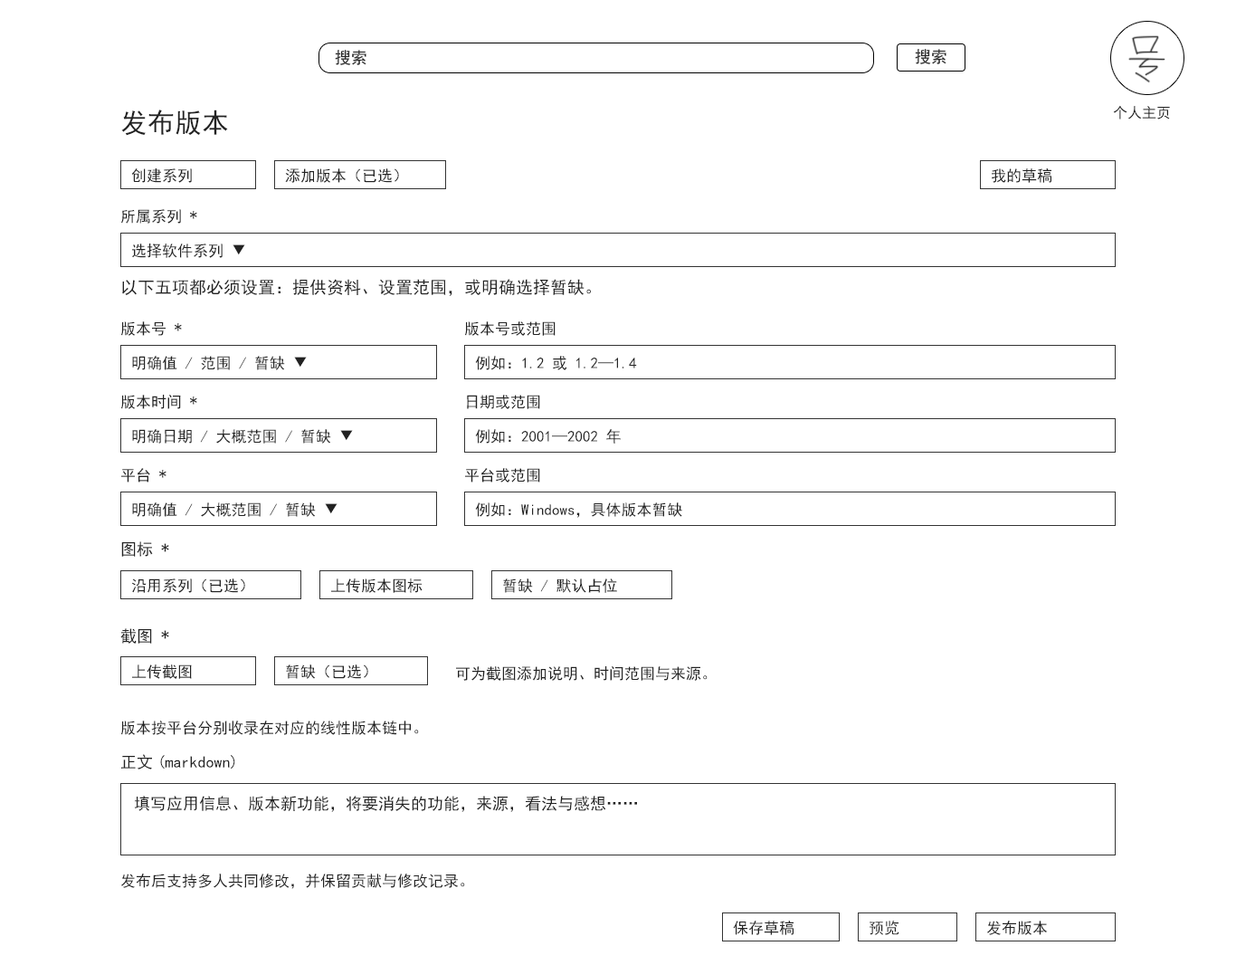
<style>
.page{position:relative;width:1236px;height:965px;background:#ffffff}
.page>*{position:absolute;margin:0}
.t1{font:16.3px "SimHei";color:#282828}
.t2{font:27.1px "SimHei";color:#222222}
.t3{font:14.5px "SimHei";color:#222222}
.t4{font:15.4px "SimHei";color:#222222}
.t5{font:17.2px "SimHei";color:#222222}
.t6{font:16.3px "SimHei";color:#222222}
</style>
<div class="page">
<p class="t1" style="left:335px;top:50px;width:31px;height:15px">搜索</p>
<p class="t1" style="left:915px;top:49px;width:32px;height:15px">搜索</p>
<p class="t2" style="left:121px;top:109px;width:107px;height:27px">发布版本</p>
<p class="t3" style="left:1113px;top:105px;width:57px;height:14px">个人主页</p>
<p class="t4" style="left:131px;top:168px;width:61px;height:15px">创建系列</p>
<p class="t4" style="left:285px;top:168px;width:114px;height:15px">添加版本（已选）</p>
<p class="t4" style="left:992px;top:168px;width:60px;height:15px">我的草稿</p>
<p class="t4" style="left:121px;top:209px;width:76px;height:15px">所属系列 *</p>
<p class="t4" style="left:132px;top:243px;width:113px;height:15px">选择软件系列 ▼</p>
<p class="t5" style="left:122px;top:279px;width:469px;height:17px">以下五项都必须设置：提供资料、设置范围，或明确选择暂缺。</p>
<p class="t4" style="left:121px;top:321px;width:61px;height:15px">版本号 *</p>
<p class="t4" style="left:465px;top:321px;width:91px;height:15px">版本号或范围</p>
<p class="t4" style="left:132px;top:356px;width:175px;height:14px">明确值 / 范围 / 暂缺 ▼</p>
<p class="t4" style="left:475px;top:356px;width:162px;height:14px">例如：1.2 或 1.2—1.4</p>
<p class="t4" style="left:121px;top:395px;width:76px;height:14px">版本时间 *</p>
<p class="t4" style="left:467px;top:395px;width:73px;height:14px">日期或范围</p>
<p class="t4" style="left:132px;top:429px;width:221px;height:14px">明确日期 / 大概范围 / 暂缺 ▼</p>
<p class="t4" style="left:475px;top:429px;width:146px;height:14px">例如：2001—2002 年</p>
<p class="t4" style="left:121px;top:468px;width:46px;height:14px">平台 *</p>
<p class="t4" style="left:465px;top:468px;width:75px;height:14px">平台或范围</p>
<p class="t4" style="left:132px;top:502px;width:206px;height:15px">明确值 / 大概范围 / 暂缺 ▼</p>
<p class="t4" style="left:475px;top:502px;width:207px;height:16px">例如：Windows，具体版本暂缺</p>
<p class="t6" style="left:121px;top:541px;width:48px;height:16px">图标 *</p>
<p class="t4" style="left:132px;top:578px;width:113px;height:15px">沿用系列（已选）</p>
<p class="t4" style="left:331px;top:578px;width:92px;height:15px">上传版本图标</p>
<p class="t4" style="left:503px;top:578px;width:114px;height:15px">暂缺 / 默认占位</p>
<p class="t6" style="left:120px;top:628px;width:49px;height:15px">截图 *</p>
<p class="t4" style="left:132px;top:664px;width:60px;height:15px">上传截图</p>
<p class="t4" style="left:286px;top:664px;width:82px;height:15px">暂缺（已选）</p>
<p class="t4" style="left:456px;top:666px;width:252px;height:15px">可为截图添加说明、时间范围与来源。</p>
<p class="t4" style="left:121px;top:720px;width:298px;height:15px">版本按平台分别收录在对应的线性版本链中。</p>
<p class="t6" style="left:121px;top:754px;width:114px;height:15px">正文(markdown)</p>
<p class="t6" style="left:134px;top:795px;width:503px;height:17px">填写应用信息、版本新功能，将要消失的功能，来源，看法与感想……</p>
<p class="t4" style="left:121px;top:873px;width:344px;height:16px">发布后支持多人共同修改，并保留贡献与修改记录。</p>
<p class="t4" style="left:733px;top:920px;width:61px;height:15px">保存草稿</p>
<p class="t4" style="left:870px;top:920px;width:29px;height:15px">预览</p>
<p class="t4" style="left:987px;top:920px;width:61px;height:15px">发布版本</p>
</div>
